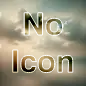
<style>
.page{position:relative;width:86px;height:86px}
.page>*{position:absolute;margin:0}
.t1{font:31px "FamiliarPro-Bold"}
</style>
<div class="page">
<p class="t1" style="left:12px;top:11px;width:62px;height:63px;text-align:center">No<br>Icon</p>
</div>
